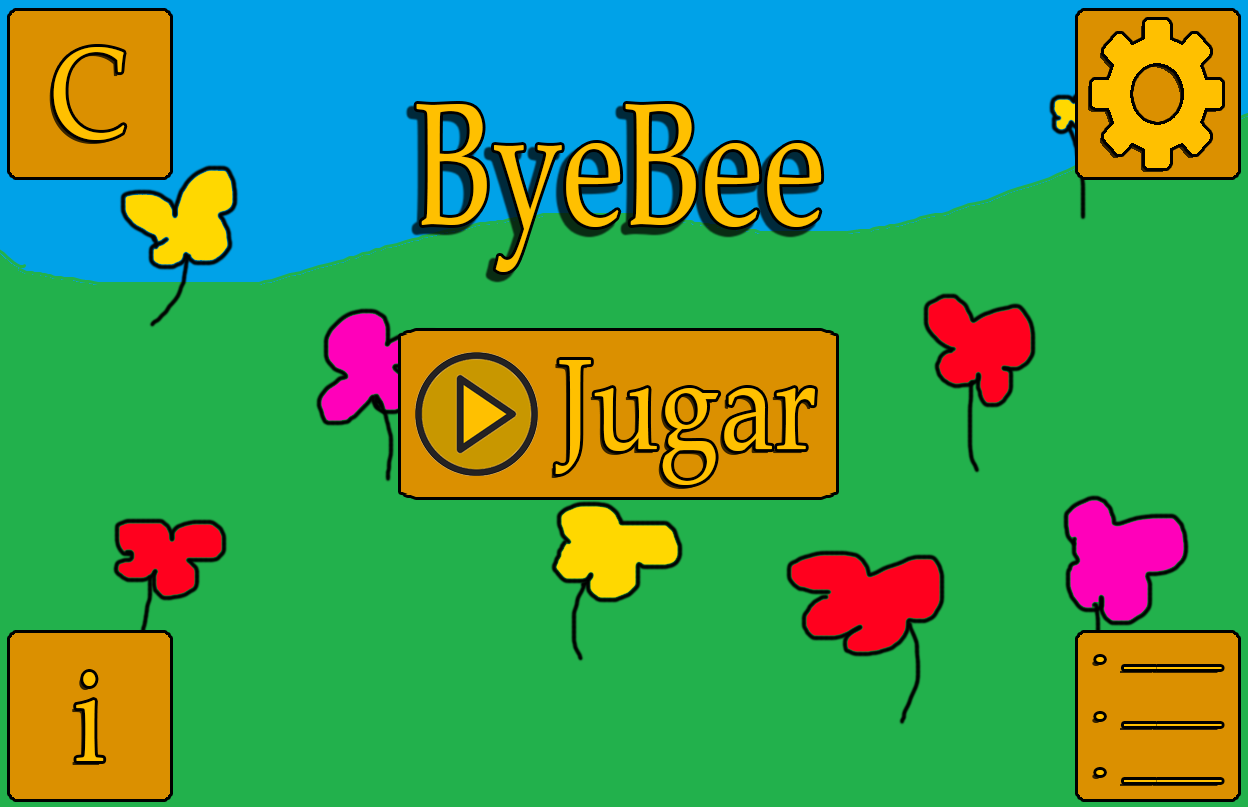
<style>
.page{position:relative;width:1248px;height:807px;background:#22b14c}
.page>*{position:absolute;margin:0}
.t1{font:128.8px "PalatinoLinotype-Roman";color:#ffc000;scale:0.84 1}
.t2{font:173.1px "PalatinoLinotype-Roman";color:#ffc000;scale:0.74 1}
</style>
<div class="page">
<p class="t1" style="left:53px;top:47px;width:72px;height:93px">C</p>
<p class="t2" style="left:416px;top:104px;width:406px;height:168px">ByeBee</p>
<p class="t1" style="left:555px;top:360px;width:260px;height:125px">Jugar</p>
<p class="t1" style="left:76px;top:672px;width:28px;height:89px">i</p>
</div>
